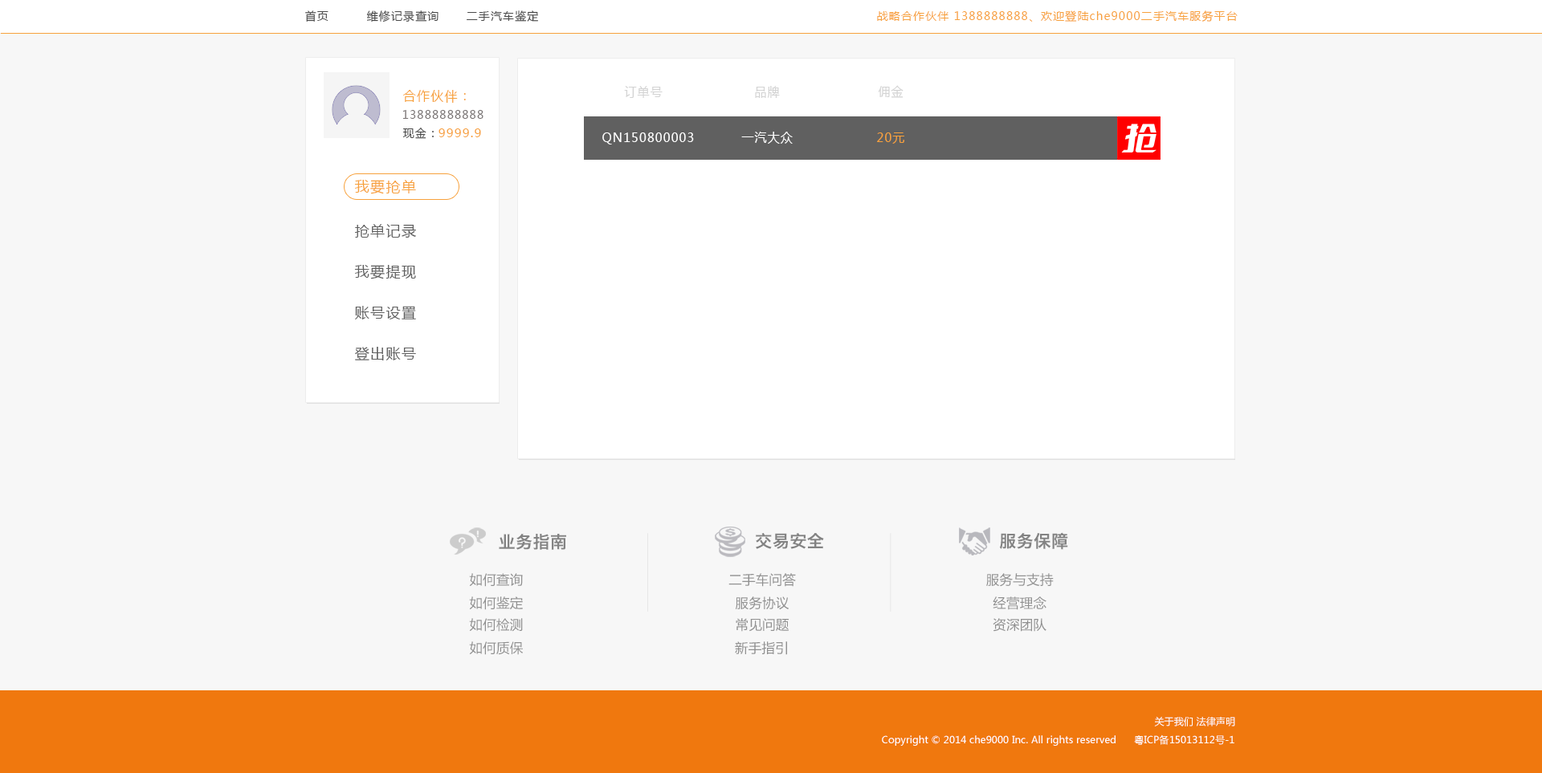
<style>
.page{position:relative;width:1542px;height:773px;background:#f7f7f7}
.page>*{position:absolute;margin:0}
.t1{font:11.2px "MicrosoftYaHei";letter-spacing:0.08em;color:#494949}
.t2{font:11.2px "MicrosoftYaHei";letter-spacing:0.08em;color:#f7a13c}
.t3{font:12.8px "MicrosoftYaHei";letter-spacing:0.08em;color:#f7a13c}
.t4{font:12.8px "MicrosoftYaHei";letter-spacing:0.08em;color:#d3d3d3;scale:0.93 1}
.t5{font:11.2px "MicrosoftYaHei";letter-spacing:0.08em;color:#787373}
.t6{font:12px "MicrosoftYaHei";letter-spacing:0.08em;color:#f7a13c}
.t7{font:12.8px "MicrosoftYaHei";letter-spacing:0.08em;color:#ffffff;scale:0.93 1}
.t8{font:12.8px "MicrosoftYaHei";letter-spacing:0.08em;color:#f7a13c;scale:0.93 1}
.t9{font:14.5px "MicrosoftYaHei";letter-spacing:0.08em;color:#f7a13c}
.t10{font:14.5px "MicrosoftYaHei";letter-spacing:0.08em;color:#606060}
.t11{font:17.1px "HiraginoSansGB-W6";letter-spacing:0.01em;color:#838383}
.t12{font:13.3px "MicrosoftYaHei";letter-spacing:0.01em;color:#909090}
.t13{font:9.6px "MicrosoftYaHei";letter-spacing:0.01em;color:#ffffff}
</style>
<div class="page">
<p class="t1" style="left:305px;top:10px;width:23px;height:12px">首页</p>
<p class="t1" style="left:366px;top:10px;width:72px;height:12px">维修记录查询</p>
<p class="t1" style="left:467px;top:10px;width:71px;height:12px">二手汽车鉴定</p>
<p class="t2" style="left:877px;top:10px;width:361px;height:12px">战略合作伙伴 1388888888、欢迎登陆che9000二手汽车服务平台</p>
<p class="t3" style="left:402px;top:90px;width:64px;height:13px">合作伙伴：</p>
<p class="t4" style="left:624px;top:86px;width:39px;height:12px">订单号</p>
<p class="t4" style="left:755px;top:86px;width:25px;height:12px">品牌</p>
<p class="t4" style="left:878px;top:85px;width:25px;height:13px">佣金</p>
<p class="t5" style="left:402px;top:110px;width:81px;height:9px">13888888888</p>
<p class="t1" style="left:403px;top:128px;width:31px;height:11px">现金：</p>
<p class="t6" style="left:438px;top:128px;width:43px;height:9px">9999.9</p>
<p class="t7" style="left:602px;top:133px;width:92px;height:12px">QN150800003</p>
<p class="t7" style="left:741px;top:132px;width:52px;height:12px">一汽大众</p>
<p class="t8" style="left:877px;top:133px;width:27px;height:11px">20元</p>
<p class="t9" style="left:354px;top:180px;width:62px;height:14px">我要抢单</p>
<p class="t10" style="left:355px;top:224px;width:61px;height:15px">抢单记录</p>
<p class="t10" style="left:354px;top:265px;width:62px;height:14px">我要提现</p>
<p class="t10" style="left:355px;top:306px;width:61px;height:14px">账号设置</p>
<p class="t10" style="left:355px;top:347px;width:61px;height:14px">登出账号</p>
<p class="t11" style="left:756px;top:533px;width:68px;height:16px">交易安全</p>
<p class="t11" style="left:999px;top:532px;width:69px;height:18px">服务保障</p>
<p class="t11" style="left:499px;top:534px;width:67px;height:16px">业务指南</p>
<p class="t12" style="left:469px;top:573px;width:54px;height:14px">如何查询</p>
<p class="t12" style="left:728px;top:573px;width:68px;height:14px">二手车问答</p>
<p class="t12" style="left:986px;top:573px;width:68px;height:14px">服务与支持</p>
<p class="t12" style="left:469px;top:597px;width:54px;height:13px">如何鉴定</p>
<p class="t12" style="left:735px;top:597px;width:54px;height:13px">服务协议</p>
<p class="t12" style="left:993px;top:597px;width:53px;height:13px">经营理念</p>
<p class="t12" style="left:469px;top:618px;width:54px;height:14px">如何检测</p>
<p class="t12" style="left:736px;top:618px;width:53px;height:14px">常见问题</p>
<p class="t12" style="left:993px;top:618px;width:53px;height:14px">资深团队</p>
<p class="t12" style="left:469px;top:642px;width:54px;height:13px">如何质保</p>
<p class="t12" style="left:735px;top:642px;width:52px;height:13px">新手指引</p>
<p class="t13" style="left:1154px;top:717px;width:81px;height:10px">关于我们 法律声明</p>
<p class="t13" style="left:882px;top:735px;width:352px;height:11px">Copyright © 2014 che9000 Inc. All rights reserved      粤ICP备15013112号-1</p>
</div>
